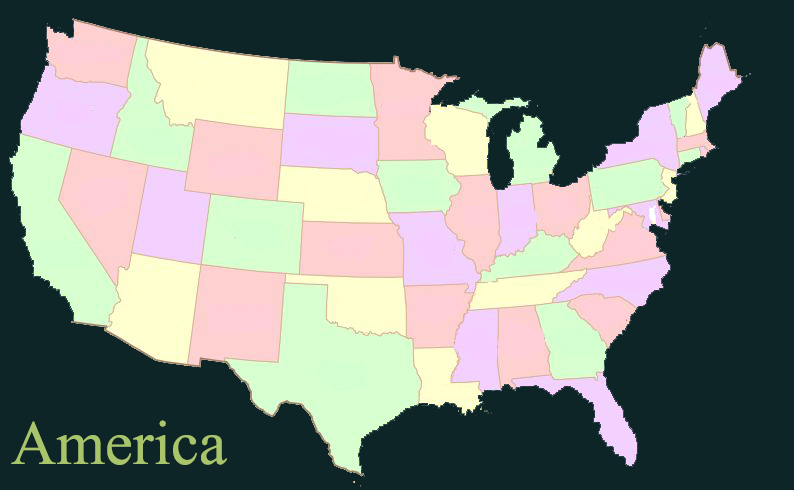
<style>
.page{position:relative;width:794px;height:490px;background:#0e2528}
.page>*{position:absolute;margin:0}
.t1{font:62.7px "TimesNewRomanPSMT";color:#a9c56c}
</style>
<div class="page">
<p class="t1" style="left:11px;top:420px;width:216px;height:45px">America</p>
</div>
